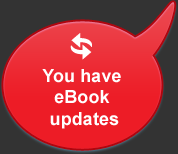
<style>
.page{position:relative;width:178px;height:154px;background:#333333}
.page>*{position:absolute;margin:0}
.t1{font:18px "Arial-BoldMT";letter-spacing:0.005em;color:#ffffff}
</style>
<div class="page">
<p class="t1" style="left:42px;top:69px;width:79px;height:60px;text-align:center">You have <br>eBook <br>updates</p>
</div>
